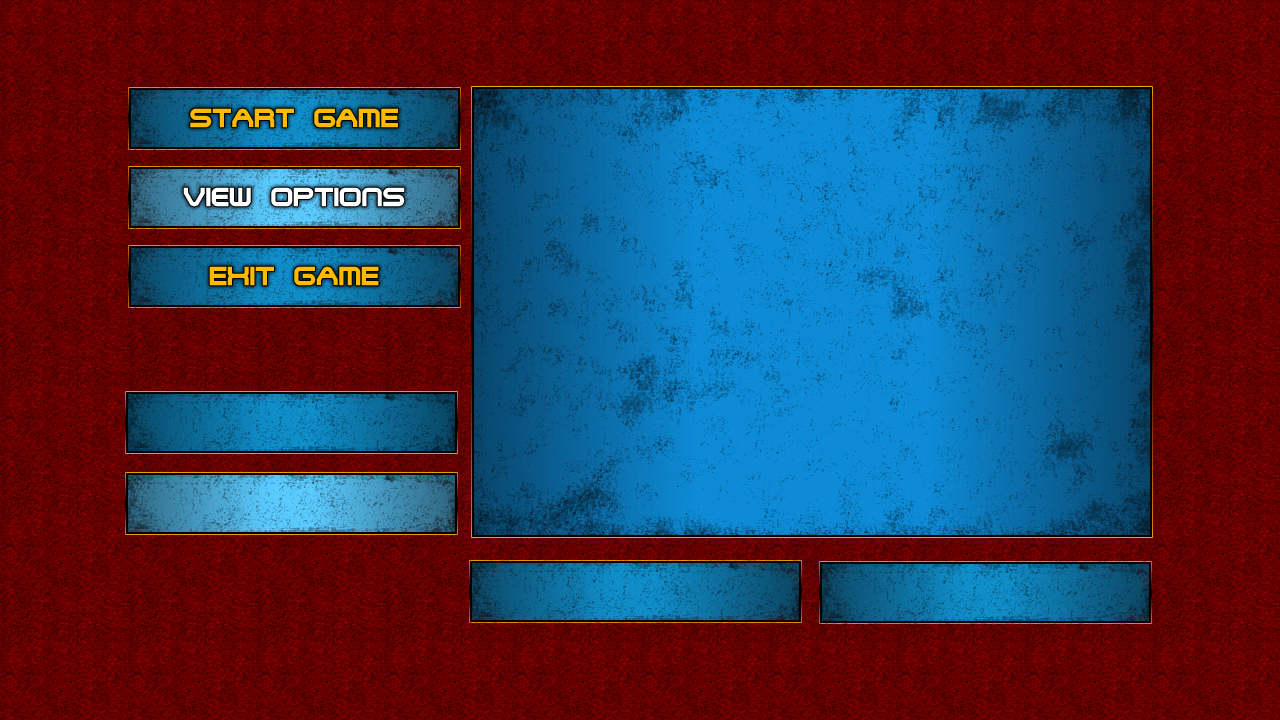
<style>
.page{position:relative;width:1280px;height:720px}
.page>*{position:absolute;margin:0}
.t1{font:28px "SteelWolfMedium";color:#ffba00}
.t2{font:28px "SteelWolfMedium";color:#ffffff}
</style>
<div class="page">
<p class="t1" style="left:190px;top:108px;width:208px;height:20px">START GAME</p>
<p class="t2" style="left:183px;top:187px;width:222px;height:20px">View Options</p>
<p class="t1" style="left:209px;top:266px;width:170px;height:20px">EXIT GAME</p>
</div>
